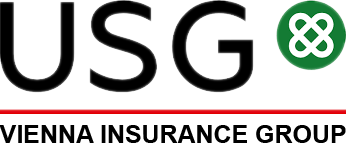
<style>
.page{position:relative;width:346px;height:146px;background:#ffffff}
.page>*{position:absolute;margin:0}
.t1{font:25.4px "Arial-BoldMT";color:#000000}
</style>
<div class="page">
<p class="t1" style="left:0px;top:125px;width:346px;height:18px">VIENNA INSURANCE GROUP</p>
</div>
